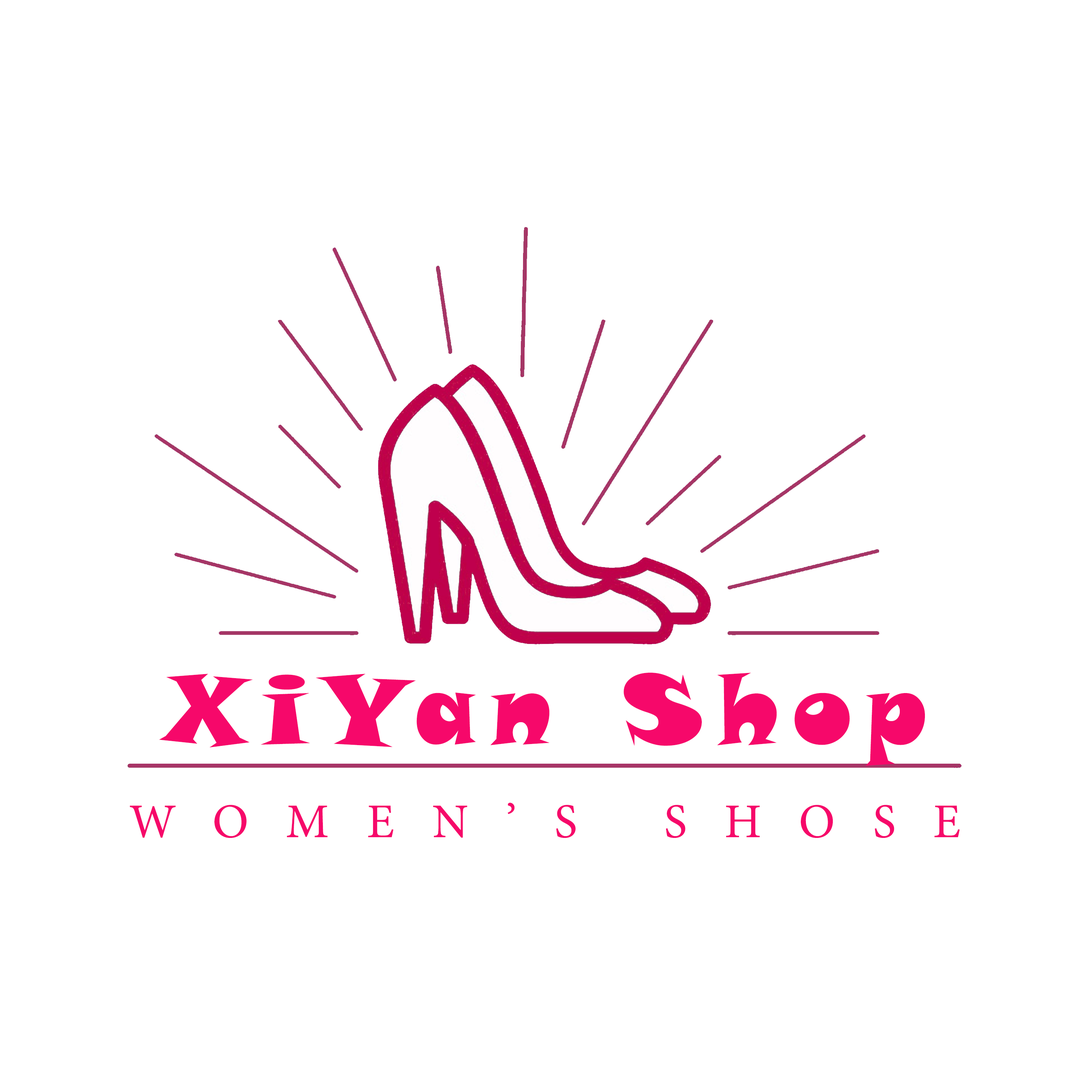
<style>
.page{position:relative;width:1092px;height:1092px;background:#ffffff}
.page>*{position:absolute;margin:0}
.t1{font:97.1px "SnapITC-Regular";letter-spacing:0.15em;color:#f6086a}
.t2{font:48.5px "MinionPro-Regular";letter-spacing:0.78em;color:#f6086a}
</style>
<div class="page">
<p class="t1" style="left:159px;top:673px;width:766px;height:93px">XiYan Shop</p>
<p class="t2" style="left:130px;top:803px;width:830px;height:35px">WOMEN’S SHOSE</p>
</div>
